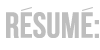
<style>
.page{position:relative;width:100px;height:50px;background:#ffffff}
.page>*{position:absolute;margin:0}
.t1{font:36px "BebasNeue";letter-spacing:-0.025em;color:#bebebe;font-weight:bold}
</style>
<div class="page">
<p class="t1" style="left:6px;top:12px;width:93px;height:26px">Resume:</p>
</div>
